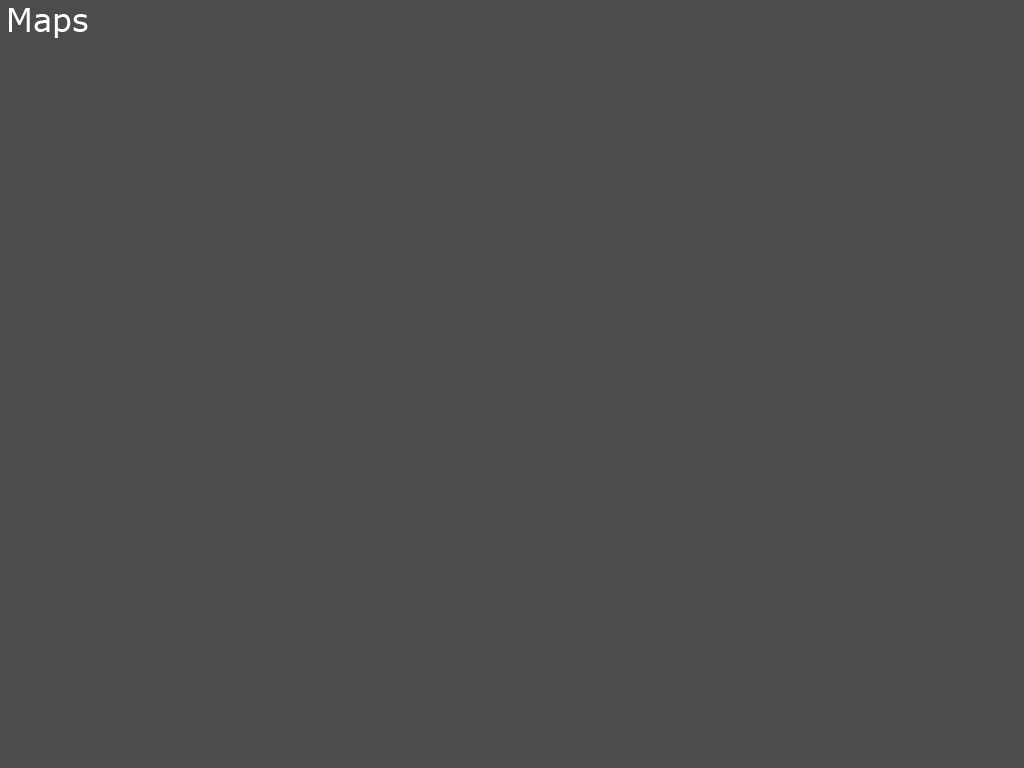
<style>
.page{position:relative;width:1024px;height:768px;background:#4c4c4c}
.page>*{position:absolute;margin:0}
.t1{font:32px "Verdana";color:#ffffff}
</style>
<div class="page">
<p class="t1" style="left:9px;top:8px;width:79px;height:30px">Maps</p>
</div>
